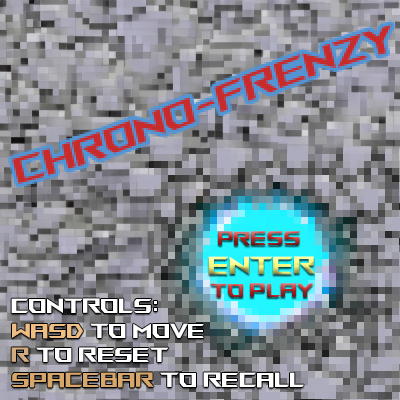
<style>
.page{position:relative;width:400px;height:400px}
.page>*{position:absolute;margin:0}
.t1{font:19.1px "ROGFonts-Regular"}
.t2{font:24.6px "ROGFonts-Regular"}
.t3{font:20.5px "ROGFonts-Regular";color:#ffffff}
.t4{font:20.5px "ROGFonts-Regular";color:#eebe85}
.t5{font:20.5px "ROGFonts-Regular";color:#d1ac80}
.t6{font:20.5px "ROGFonts-Regular";color:#d7a66b}
</style>
<div class="page">
<p class="t1" style="left:208px;top:231px;width:108px;height:66px;text-align:center">Press <br><span class="t2">Enter<br></span>To Play</p>
<p class="t3" style="left:11px;top:298px;width:293px;height:90px">Controls:<br><span class="t4">WASD</span> to Move<br><span class="t5">R</span> to RESET<br><span class="t6">sPacebar </span>to recall</p>
</div>
